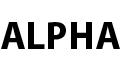
<style>
.page{position:relative;width:120px;height:70px;background:#ffffff}
.page>*{position:absolute;margin:0}
.t1{font:39px "MyriadPro-Bold";color:#000000}
</style>
<div class="page">
<p class="t1" style="left:1px;top:22px;width:119px;height:27px">ALPHA</p>
</div>
